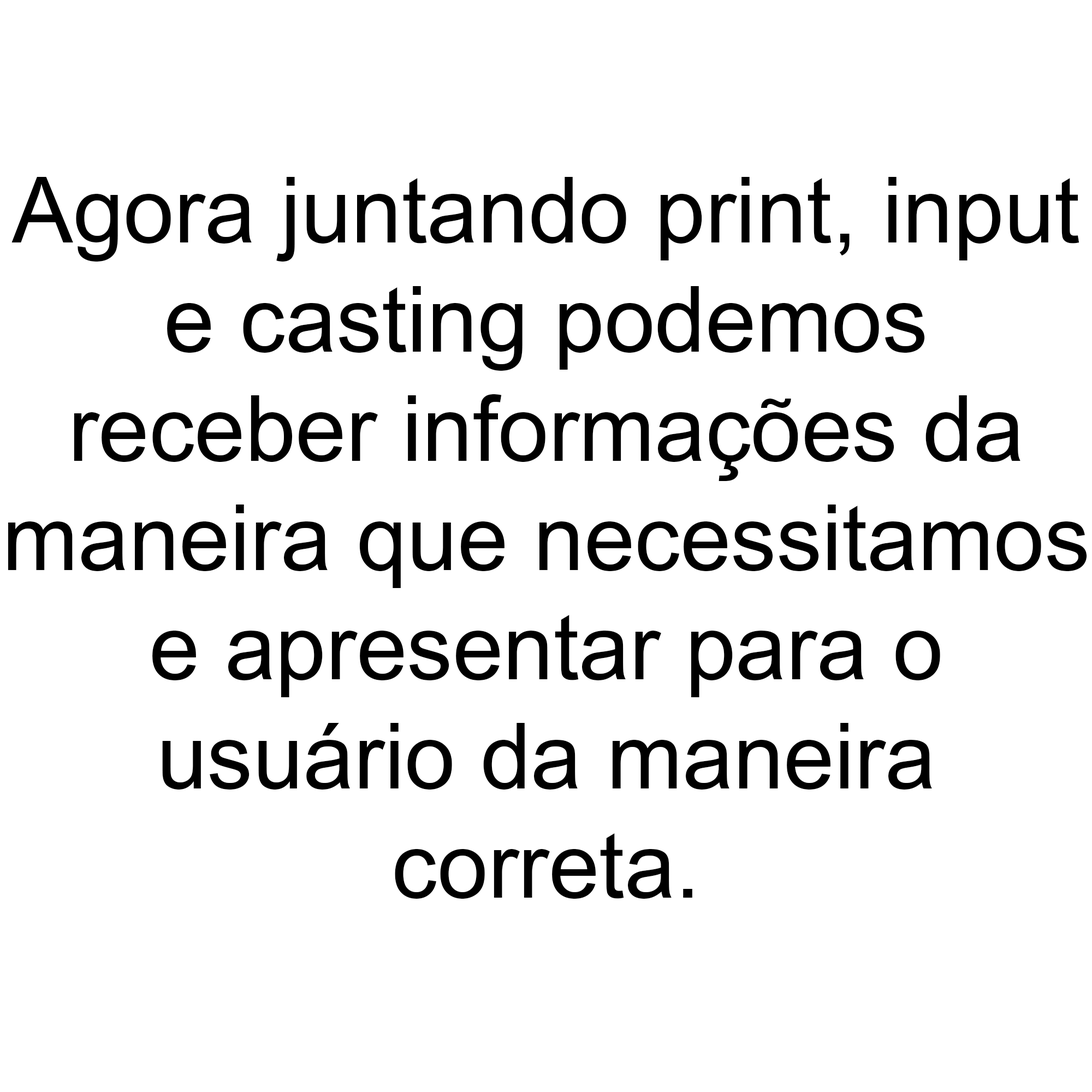
<style>
.page{position:relative;width:1092px;height:1092px;background:#ffffff}
.page>*{position:absolute;margin:0}
.t1{font:91px "ArialMT";color:#000000}
</style>
<div class="page">
<p class="t1" style="left:8px;top:177px;width:1079px;height:722px;text-align:center">Agora juntando print, input<br>e casting podemos<br>receber informações da<br>maneira que necessitamos<br>e apresentar para o<br>usuário da maneira<br>correta.</p>
</div>
